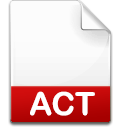
<style>
.page{position:relative;width:128px;height:128px;background:#ffffff}
.page>*{position:absolute;margin:0}
.t1{font:32px "ArialRoundedMTBold";color:#ffffff}
</style>
<div class="page">
<p class="t1" style="left:30px;top:91px;width:65px;height:25px">ACT</p>
</div>
